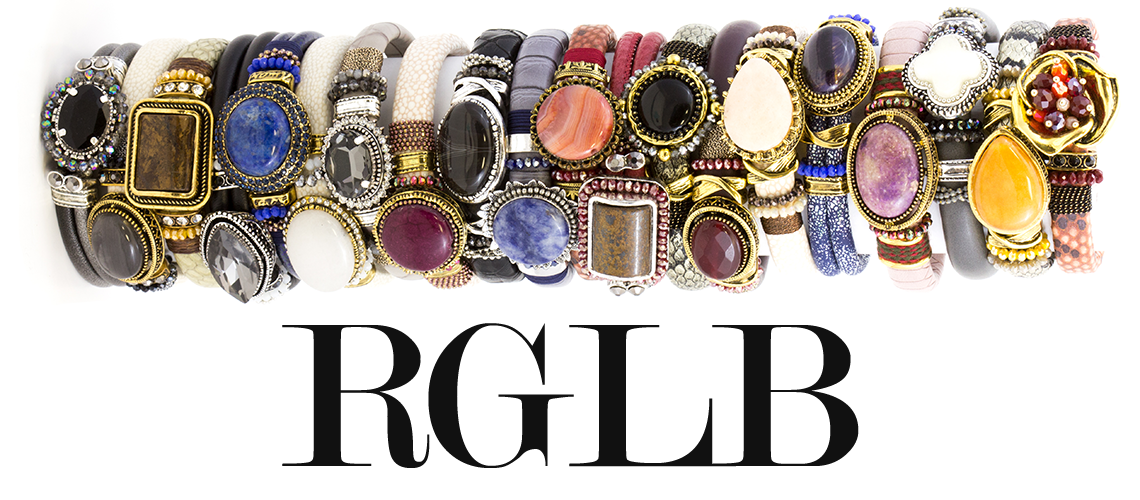
<style>
.page{position:relative;width:1140px;height:500px;background:#ffffff}
.page>*{position:absolute;margin:0}
.t1{font:218.5px "Modern-Regular";letter-spacing:-0.025em;color:#111111}
</style>
<div class="page">
<p class="t1" style="left:282px;top:323px;width:577px;height:145px">RGLB</p>
</div>
